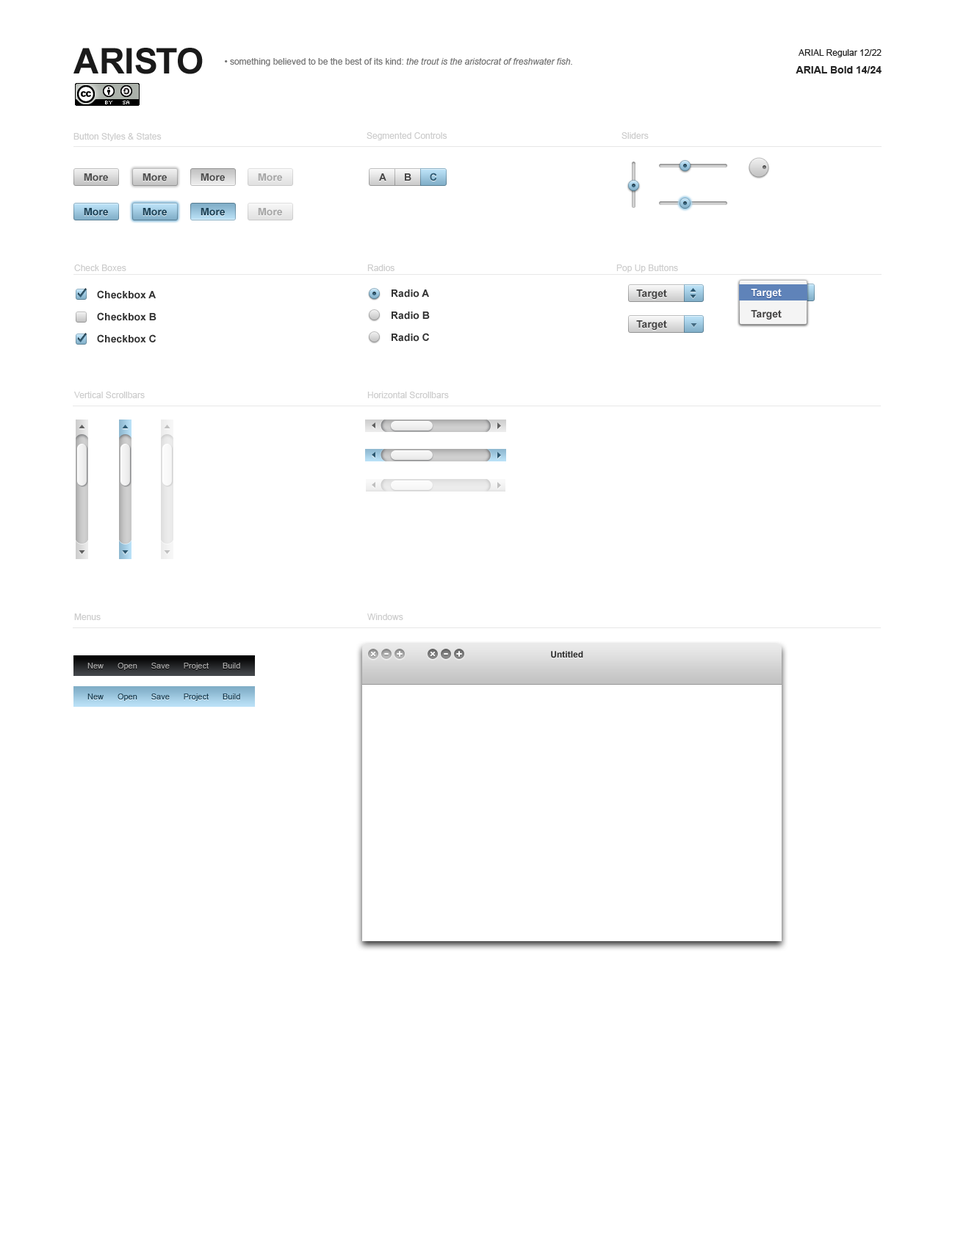
<style>
.page{position:relative;width:955px;height:1249px;background:#ffffff}
.page>*{position:absolute;margin:0}
.t1{font:35.3px "Arial-BoldMT";color:#1a1a1a}
.t2{font:8.8px/16.2px "ArialMT";color:#232323}
.t3{font:10.3px/17.6px "Arial-BoldMT";color:#232323}
.t4{font:8.8px "ArialMT";color:#747474}
.t5{font:8.8px "Arial-ItalicMT";color:#747474}
.t6{font:8.8px "ArialMT";color:#cdcdcd}
.t7{font:10.3px "Arial-BoldMT";color:#4f4f4f}
.t8{font:10.3px "Arial-BoldMT";color:#464545}
.t9{font:10.3px "Arial-BoldMT";color:#2d5972}
.t10{font:10.3px "Arial-BoldMT";color:#1c4257}
.t11{font:10.3px/22px "Arial-BoldMT";color:#333333}
.t12{font:10.3px "Arial-BoldMT";color:#ffffff}
.t13{font:8.8px "Arial-BoldMT";color:#2c2c2c}
.t14{font:8.1px "ArialMT";color:#a5a5a5}
.t15{font:8.1px "ArialMT";color:#1c4257}
</style>
<div class="page">
<p class="t1" style="left:73px;top:48px;width:130px;height:26px">ARISTO</p>
<p class="t2" style="left:796px;top:49px;width:85px;height:24px;text-align:right">ARIAL Regular 12/22<br><span class="t3">ARIAL Bold 14/24</span></p>
<p class="t4" style="left:225px;top:58px;width:347px;height:8px">• something believed to be the best of its kind: <span class="t5">the trout is the aristocrat of freshwater fish.</span></p>
<p class="t6" style="left:73px;top:133px;width:89px;height:8px">Button Styles &amp; States</p>
<p class="t6" style="left:367px;top:132px;width:80px;height:8px">Segmented Controls</p>
<p class="t6" style="left:621px;top:132px;width:28px;height:7px">Sliders</p>
<p class="t7" style="left:84px;top:173px;width:24px;height:8px">More</p>
<p class="t7" style="left:143px;top:173px;width:24px;height:8px">More</p>
<p class="t7" style="left:201px;top:173px;width:24px;height:8px">More</p>
<p class="t8" style="left:379px;top:173px;width:7px;height:8px">A</p>
<p class="t8" style="left:405px;top:173px;width:6px;height:8px">B</p>
<p class="t9" style="left:430px;top:173px;width:7px;height:8px">C</p>
<p class="t10" style="left:84px;top:208px;width:24px;height:8px">More</p>
<p class="t10" style="left:143px;top:208px;width:24px;height:8px">More</p>
<p class="t10" style="left:201px;top:208px;width:24px;height:8px">More</p>
<p class="t6" style="left:74px;top:264px;width:52px;height:7px">Check Boxes</p>
<p class="t6" style="left:367px;top:264px;width:27px;height:7px">Radios</p>
<p class="t6" style="left:616px;top:264px;width:62px;height:9px">Pop Up Buttons</p>
<p class="t11" style="left:97px;top:290px;width:59px;height:53px">Checkbox A<br>Checkbox B<br>Checkbox C</p>
<p class="t11" style="left:392px;top:289px;width:38px;height:53px">Radio A<br>Radio B<br>Radio C</p>
<p class="t8" style="left:636px;top:289px;width:31px;height:10px">Target</p>
<p class="t12" style="left:751px;top:289px;width:31px;height:9px">Target</p>
<p class="t8" style="left:751px;top:310px;width:31px;height:10px">Target</p>
<p class="t8" style="left:636px;top:320px;width:31px;height:10px">Target</p>
<p class="t6" style="left:74px;top:392px;width:71px;height:6px">Vertical Scrollbars</p>
<p class="t6" style="left:367px;top:392px;width:82px;height:6px">Horizontal Scrollbars</p>
<p class="t6" style="left:74px;top:613px;width:27px;height:7px">Menus</p>
<p class="t6" style="left:367px;top:613px;width:36px;height:7px">Windows</p>
<p class="t13" style="left:551px;top:651px;width:32px;height:7px">Untitled</p>
<p class="t14" style="left:87px;top:663px;width:153px;height:7px">New Open Save Project Build</p>
<p class="t15" style="left:87px;top:693px;width:153px;height:8px">New Open Save Project Build</p>
</div>
